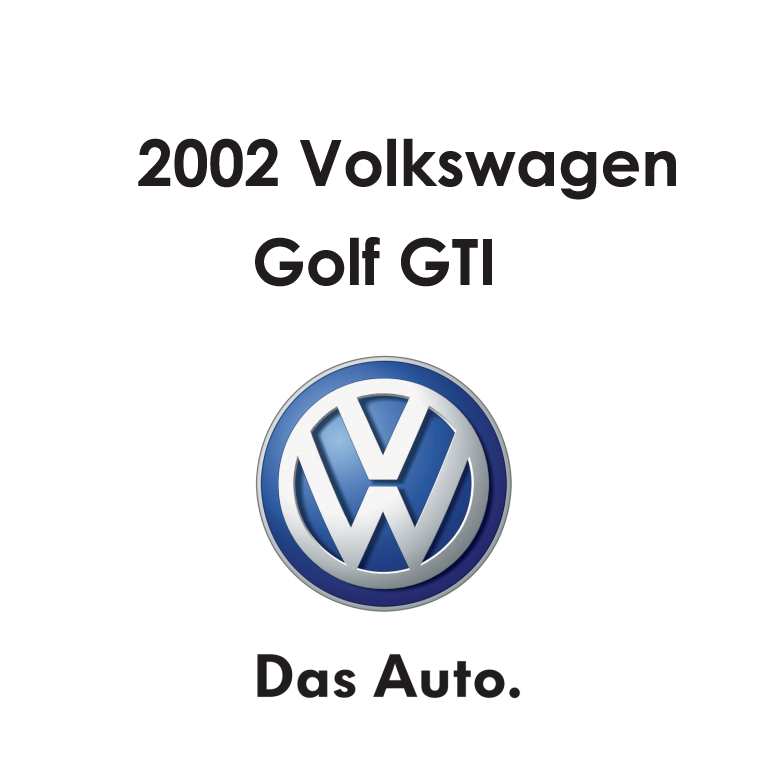
<style>
.page{position:relative;width:768px;height:768px;background:#ffffff}
.page>*{position:absolute;margin:0}
.t1{font:64px "CenturyGothic-Bold";color:#211d1e}
</style>
<div class="page">
<p class="t1" style="left:138px;top:138px;width:538px;height:62px">2002 Volkswagen</p>
<p class="t1" style="left:255px;top:237px;width:237px;height:50px">Golf GTI</p>
</div>
